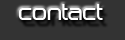
<style>
.page{position:relative;width:125px;height:40px;background:#333333}
.page>*{position:absolute;margin:0}
.t1{font:20px "BirdmanBold";color:#ffffff}
</style>
<div class="page">
<p class="t1" style="left:18px;top:4px;width:85px;height:16px">contact</p>
</div>
